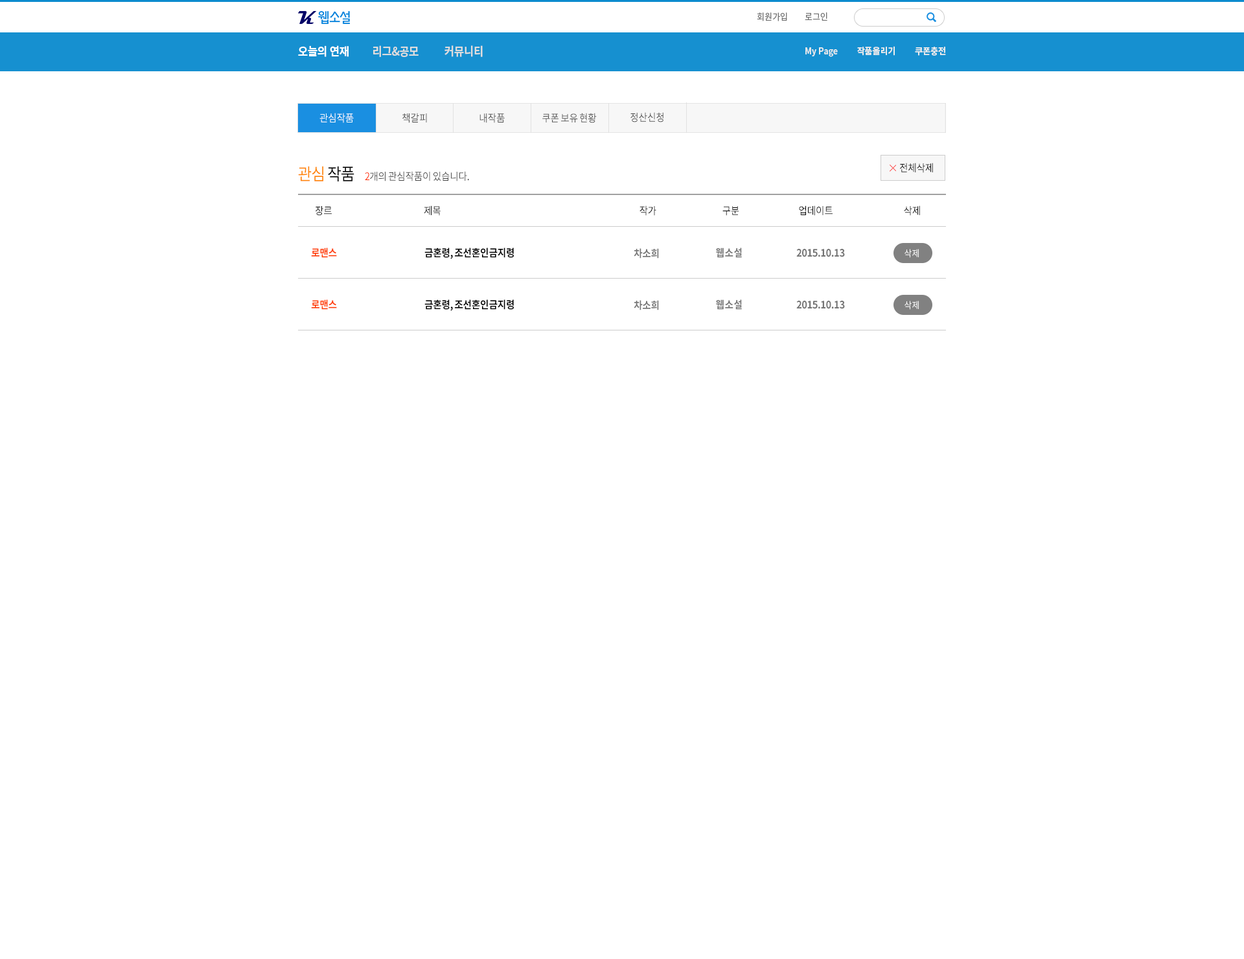
<style>
.page{position:relative;width:1244px;height:959px;background:#ffffff}
.page>*{position:absolute;margin:0}
.t1{font:9.1px "NotoSansCJKkr-Regular";letter-spacing:-0.002em;color:#727272;scale:0.92 1}
.t2{font:11.7px "NotoSansCJKkr-Bold";letter-spacing:-0.002em;color:#dddddd;scale:0.92 1}
.t3{font:11.7px "NotoSansCJKkr-Bold";letter-spacing:-0.002em;color:#ffffff;scale:0.92 1}
.t4{font:9.1px "NotoSansCJKkr-Bold";letter-spacing:-0.002em;color:#ececec;scale:0.92 1}
.t5{font:10.4px "NotoSansCJKkr-Regular";letter-spacing:-0.05em;color:#ffffff;scale:0.92 1}
.t6{font:10.4px "NotoSansCJKkr-Regular";letter-spacing:-0.05em;color:#474747;scale:0.92 1}
.t7{font:16.8px "NotoSansCJKkr-Regular";letter-spacing:-0.05em;color:#ff8400;scale:0.92 1}
.t8{font:16.8px "NotoSansCJKkr-Regular";letter-spacing:-0.05em;color:#000000;scale:0.92 1}
.t9{font:10.4px "NotoSansCJKkr-Regular";letter-spacing:-0.05em;color:#ff3000;scale:0.92 1}
.t10{font:10.4px "NotoSansCJKkr-Regular";letter-spacing:-0.05em;color:#000000;scale:0.92 1}
.t11{font:10.4px "NotoSansCJKkr-Bold";letter-spacing:-0.05em;color:#ff3c00;scale:0.92 1}
.t12{font:10.4px "NotoSansCJKkr-Bold";letter-spacing:-0.05em;color:#000000;scale:0.92 1}
.t13{font:10.4px "NotoSansCJKkr-Bold";letter-spacing:-0.05em;color:#747474;scale:0.92 1}
.t14{font:10.4px "NotoSansCJKkr-Bold";color:#747474;scale:0.92 1}
.t15{font:9.1px "NotoSansCJKkr-Regular";color:#ffffff;scale:0.92 1}
</style>
<div class="page">
<p class="t1" style="left:757px;top:12px;width:30px;height:9px">회원가입</p>
<p class="t1" style="left:805px;top:12px;width:22px;height:9px">로그인</p>
<p class="t2" style="left:298px;top:45px;width:185px;height:12px"><span class="t3">오늘의 연재         </span>리그&amp;공모          커뮤니티</p>
<p class="t4" style="left:805px;top:46px;width:141px;height:11px">My Page          작품올리기          쿠폰충전</p>
<p class="t5" style="left:319px;top:113px;width:35px;height:10px">관심작품</p>
<p class="t6" style="left:402px;top:113px;width:25px;height:10px">책갈피</p>
<p class="t6" style="left:479px;top:113px;width:26px;height:10px">내작품</p>
<p class="t6" style="left:542px;top:113px;width:55px;height:10px">쿠폰 보유 현황</p>
<p class="t6" style="left:630px;top:112px;width:33px;height:10px">정산신청</p>
<p class="t7" style="left:298px;top:166px;width:56px;height:15px">관심<span class="t8"> 작품</span></p>
<p class="t6" style="left:365px;top:171px;width:104px;height:10px"><span class="t9">2</span>개의 관심작품이 있습니다.</p>
<p class="t10" style="left:900px;top:163px;width:33px;height:10px">전체삭제</p>
<p class="t10" style="left:315px;top:206px;width:17px;height:10px">장르</p>
<p class="t10" style="left:424px;top:205px;width:16px;height:11px">제목</p>
<p class="t10" style="left:639px;top:205px;width:17px;height:11px">작가</p>
<p class="t10" style="left:722px;top:206px;width:17px;height:10px">구분</p>
<p class="t10" style="left:799px;top:205px;width:33px;height:11px">업데이트</p>
<p class="t10" style="left:904px;top:205px;width:16px;height:11px">삭제</p>
<p class="t11" style="left:311px;top:247px;width:26px;height:11px">로맨스</p>
<p class="t12" style="left:424px;top:247px;width:90px;height:12px">금혼령, 조선혼인금지령</p>
<p class="t13" style="left:634px;top:248px;width:25px;height:10px">차소희</p>
<p class="t14" style="left:716px;top:247px;width:26px;height:11px">웹소설</p>
<p class="t13" style="left:796px;top:249px;width:49px;height:8px">2015.10.13</p>
<p class="t15" style="left:904px;top:249px;width:15px;height:9px">삭제</p>
<p class="t11" style="left:311px;top:299px;width:26px;height:11px">로맨스</p>
<p class="t12" style="left:424px;top:299px;width:90px;height:12px">금혼령, 조선혼인금지령</p>
<p class="t13" style="left:634px;top:300px;width:25px;height:10px">차소희</p>
<p class="t14" style="left:716px;top:299px;width:26px;height:11px">웹소설</p>
<p class="t13" style="left:796px;top:301px;width:49px;height:8px">2015.10.13</p>
<p class="t15" style="left:904px;top:301px;width:15px;height:9px">삭제</p>
</div>
